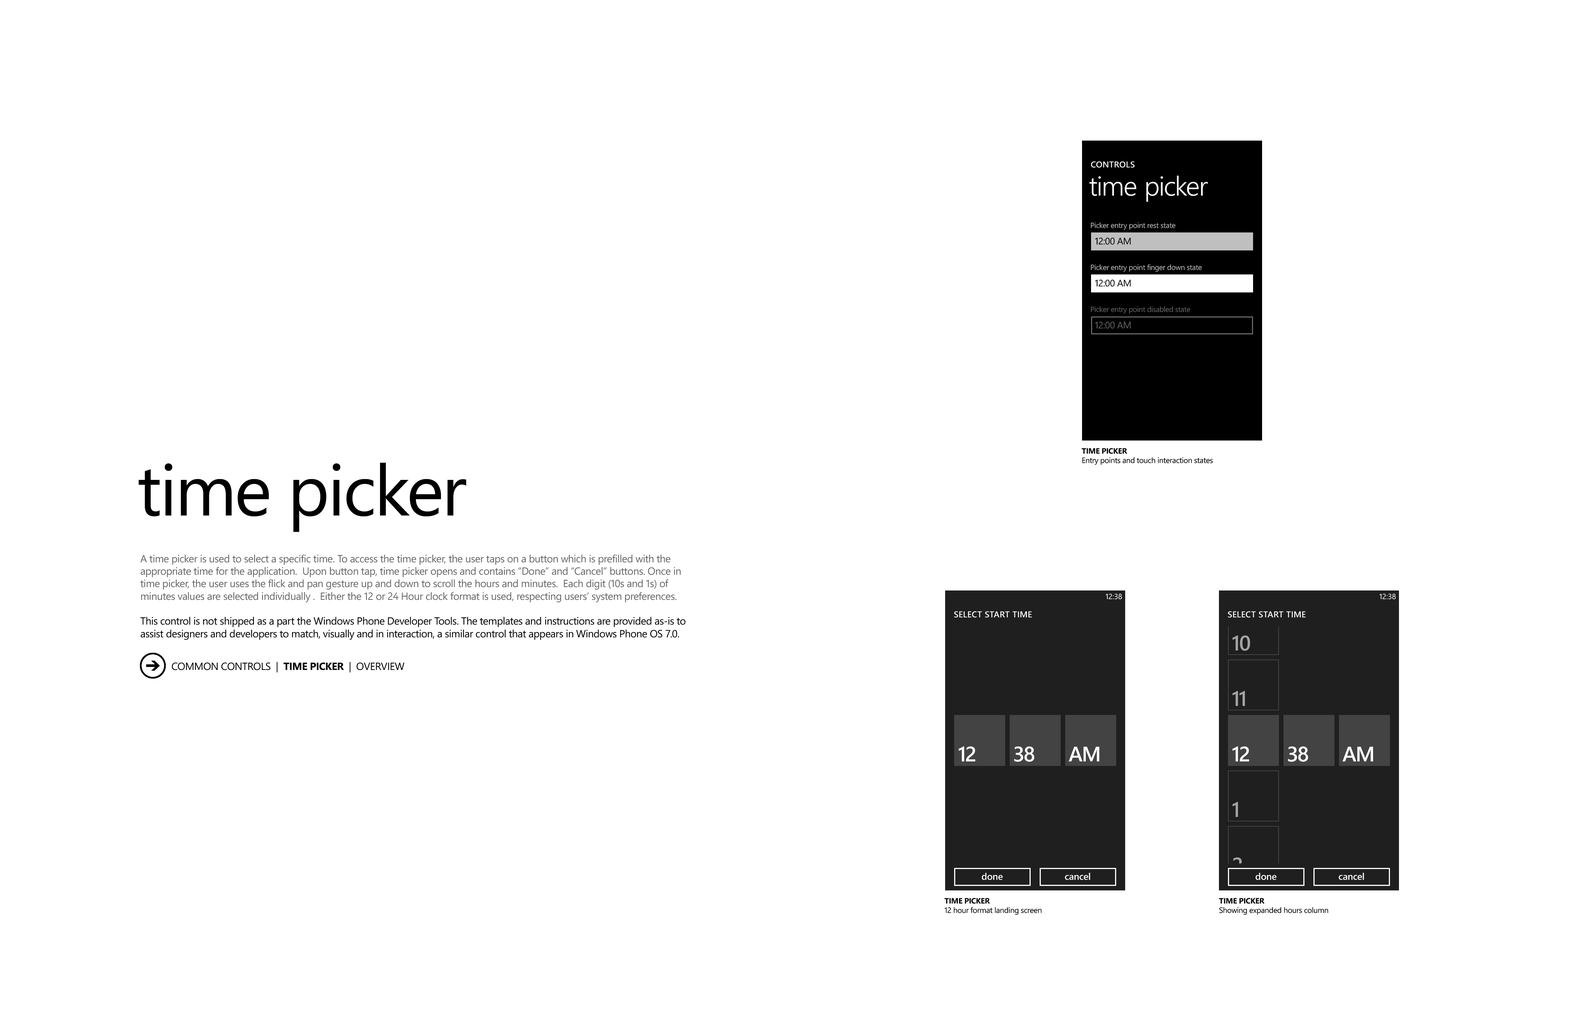
<style>
.page{position:relative;width:1594px;height:1031px;background:#ffffff}
.page>*{position:absolute;margin:0}
.t1{font:8.5px "SegoeWP-Semibold";letter-spacing:0.025em;color:#ffffff;text-transform:uppercase}
.t2{font:27px "SegoeWP-SemiLight";letter-spacing:-0.01em;color:#ffffff}
.t3{font:7.5px "SegoeWP";letter-spacing:-0.025em;color:#bfbfbf}
.t4{font:9.5px "SegoeWP";letter-spacing:-0.025em;color:#000000}
.t5{font:7.5px "SegoeWP";letter-spacing:-0.025em;color:#666666}
.t6{font:9.5px "SegoeWP";letter-spacing:-0.025em;color:#666666}
.t7{font:7.8px "SegoeWP";letter-spacing:-0.025em;color:#000000}
.t8{font:7.8px "SegoeWP-Bold";letter-spacing:-0.025em;color:#000000;text-transform:uppercase}
.t9{font:71.1px "SegoeWP";letter-spacing:-0.025em;color:#000000}
.t10{font:10.4px "SegoeWP";letter-spacing:-0.025em;color:#666666}
.t11{font:10.4px "SegoeWP";letter-spacing:-0.025em;color:#000000}
.t12{font:10.4px "SegoeWP-Bold";letter-spacing:-0.025em;color:#000000}
</style>
<div class="page">
<p class="t1" style="left:1091px;top:161px;width:43px;height:7px">controls</p>
<p class="t2" style="left:1089px;top:176px;width:119px;height:26px">time picker</p>
<p class="t3" style="left:1090px;top:222px;width:85px;height:8px">Picker entry point rest state</p>
<p class="t4" style="left:1095px;top:238px;width:36px;height:7px">12:00 AM</p>
<p class="t3" style="left:1090px;top:264px;width:112px;height:8px">Picker entry point finger down state</p>
<p class="t4" style="left:1095px;top:280px;width:36px;height:7px">12:00 AM</p>
<p class="t5" style="left:1090px;top:306px;width:100px;height:8px">Picker entry point disabled state</p>
<p class="t6" style="left:1095px;top:322px;width:36px;height:7px">12:00 AM</p>
<p class="t7" style="left:1082px;top:448px;width:131px;height:17px"><span class="t8">time picker<br></span>Entry points and touch interaction states</p>
<p class="t9" style="left:138px;top:463px;width:328px;height:69px">time picker</p>
<p class="t10" style="left:140px;top:555px;width:546px;height:85px">A time picker is used to select a specific time. To access the time picker, the user taps on a button which is prefilled with the appropriate time for the application.  Upon button tap, time picker opens and contains “Done” and “Cancel” buttons. Once in time picker, the user uses the flick and pan gesture up and down to scroll the hours and minutes.  Each digit (10s and 1s) of minutes values are selected individually .  Either the 12 or 24 Hour clock format is used, respecting users’ system preferences.<span class="t11"> <br><br>This control is not shipped as a part the Windows Phone Developer Tools. The templates and instructions are provided as-is to assist designers and developers to match, visually and in interaction, a similar control that appears in Windows Phone OS 7.0.</span></p>
<p class="t11" style="left:172px;top:662px;width:232px;height:11px">COMMON CONTROLS  |  <span class="t12">TIME PICKER</span>  |  OVERVIEW</p>
<p class="t7" style="left:944px;top:898px;width:97px;height:17px"><span class="t8">time picker<br></span>12 hour format landing screen</p>
<p class="t7" style="left:1219px;top:898px;width:109px;height:17px"><span class="t8">time picker<br></span>Showing expanded hours column</p>
</div>
